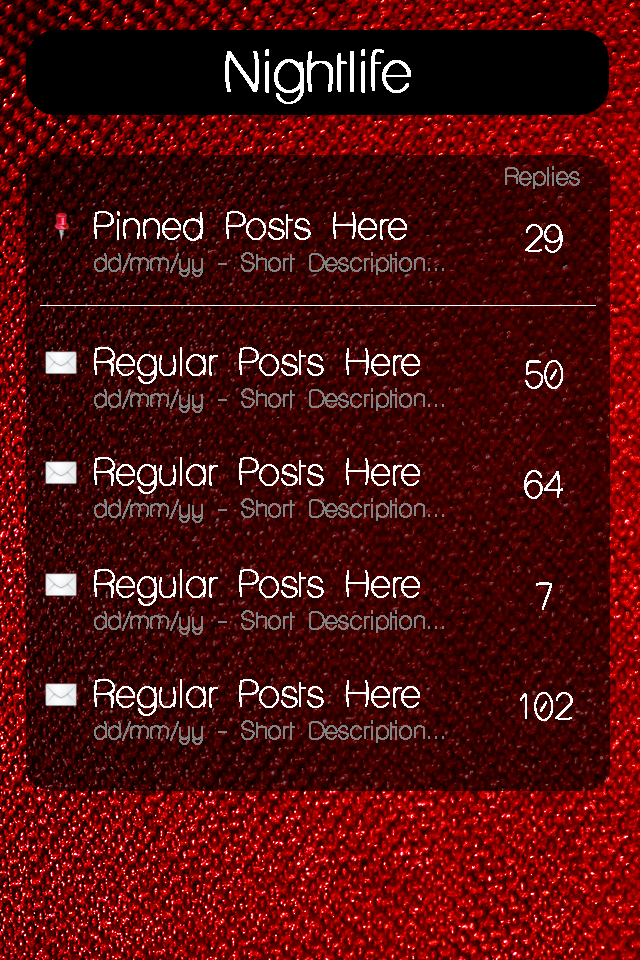
<style>
.page{position:relative;width:640px;height:960px}
.page>*{position:absolute;margin:0}
.t1{font:54.4px "LaneHumouresque";color:#ffffff;font-weight:bold}
.t2{font:22.6px "LaneHumouresque";color:#838383;font-weight:bold}
.t3{font:36px "LaneHumouresque";color:#ffffff;font-weight:bold}
.t4{font:36.2px "LaneHumouresque";color:#ffffff;font-weight:bold}
.t5{font:22.7px "LaneHumouresque";color:#838383;font-weight:bold}
</style>
<div class="page">
<p class="t1" style="left:225px;top:49px;width:186px;height:55px">Nightlife</p>
<p class="t2" style="left:505px;top:166px;width:75px;height:23px">Replies</p>
<p class="t3" style="left:94px;top:211px;width:313px;height:30px">Pinned Posts Here</p>
<p class="t4" style="left:525px;top:224px;width:38px;height:29px">29</p>
<p class="t5" style="left:94px;top:252px;width:350px;height:25px">dd/mm/yy - Short Description...</p>
<p class="t3" style="left:94px;top:347px;width:326px;height:37px">Regular Posts Here</p>
<p class="t4" style="left:525px;top:360px;width:38px;height:29px">50</p>
<p class="t5" style="left:94px;top:388px;width:350px;height:25px">dd/mm/yy - Short Description...</p>
<p class="t3" style="left:94px;top:457px;width:326px;height:37px">Regular Posts Here</p>
<p class="t4" style="left:524px;top:470px;width:39px;height:29px">64</p>
<p class="t5" style="left:94px;top:498px;width:350px;height:25px">dd/mm/yy - Short Description...</p>
<p class="t3" style="left:94px;top:569px;width:326px;height:37px">Regular Posts Here</p>
<p class="t4" style="left:536px;top:582px;width:16px;height:28px">7</p>
<p class="t5" style="left:94px;top:610px;width:350px;height:25px">dd/mm/yy - Short Description...</p>
<p class="t3" style="left:94px;top:679px;width:326px;height:37px">Regular Posts Here</p>
<p class="t4" style="left:520px;top:692px;width:53px;height:29px">102</p>
<p class="t5" style="left:94px;top:720px;width:350px;height:25px">dd/mm/yy - Short Description...</p>
</div>
